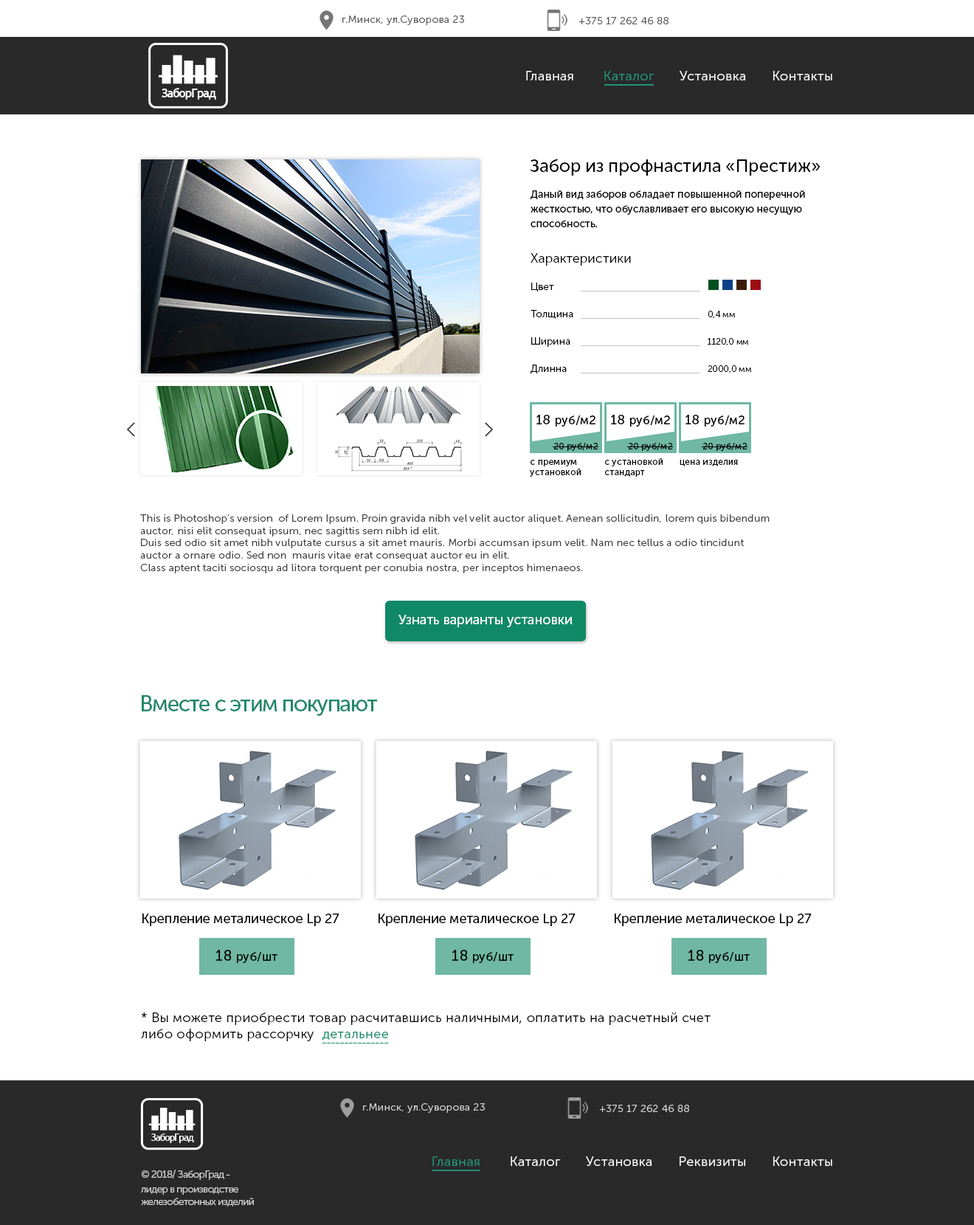
<style>
.page{position:relative;width:974px;height:1225px;background:#ffffff}
.page>*{position:absolute;margin:0}
.t1{font:10.3px "MuseoSansCyrl-300";letter-spacing:0.025em;color:#585858}
.t2{font:13.3px "MuseoSansCyrl-300";letter-spacing:0.025em;color:#ffffff}
.t3{font:13.3px "MuseoSansCyrl-300";letter-spacing:0.025em;color:#fefefe}
.t4{font:13.3px "MuseoSansCyrl-300";letter-spacing:0.025em;color:#209573}
.t5{font:12.2px "TrebuchetMS-Bold";letter-spacing:-0.075em;color:#ffffff}
.t6{font:17.7px "MuseoSansCyrl-500";color:#000000}
.t7{font:10.3px/14.8px "MuseoSansCyrl-500";color:#000000}
.t8{font:13.3px "MuseoSansCyrl-300";color:#000000}
.t9{font:10.3px "MuseoSansCyrl-300";color:#000000}
.t10{font:8.9px "MuseoSansCyrl-300";color:#000000}
.t11{font:11.8px "MuseoSansCyrl-500";letter-spacing:0.025em;color:#000000}
.t12{font:13.3px "MuseoSansCyrl-500";letter-spacing:0.025em;color:#000000}
.t13{font:8.9px "MuseoSansCyrl-500";letter-spacing:0.025em;color:#000000}
.t14{font:10.3px "MuseoSansCyrl-300";letter-spacing:0.025em;color:#404040}
.t15{font:13.3px "MuseoSansCyrl-500";color:#ffffff}
.t16{font:22.1px "MuseoSansCyrl-500";letter-spacing:-0.05em;color:#21886a}
.t17{font:13.3px "MuseoSansCyrl-500";color:#000000}
.t18{font:14.8px "MuseoSansCyrl-500";letter-spacing:0.025em;color:#000000}
.t19{font:13.3px "MuseoSansCyrl-300";letter-spacing:0.025em;color:#000000}
.t20{font:13.3px "MuseoSansCyrl-300";letter-spacing:0.025em;color:#108966}
.t21{font:10.3px "MuseoSansCyrl-300";letter-spacing:0.025em;color:#d4d4d4}
.t22{font:9.6px "TrebuchetMS-Bold";letter-spacing:-0.075em;color:#ffffff}
.t23{font:10.3px "MuseoSansCyrl-300";letter-spacing:-0.05em;color:#cfcfcf}
.t24{font:10.3px/14.8px "MuseoSansCyrl-300";letter-spacing:-0.05em;color:#cfcfcf}
</style>
<div class="page">
<p class="t1" style="left:342px;top:15px;width:122px;height:10px">г.Минск, ул.Суворова 23</p>
<p class="t1" style="left:578px;top:17px;width:90px;height:7px">+375 17 262 46 88</p>
<p class="t2" style="left:526px;top:71px;width:306px;height:9px"><span class="t3">Главная        </span><span class="t4">Каталог </span>      Установка       Контакты</p>
<p class="t5" style="left:162px;top:88px;width:54px;height:12px">ЗаборГрад</p>
<p class="t6" style="left:530px;top:159px;width:290px;height:17px">Забор из профнастила «Престиж»</p>
<p class="t7" style="left:530px;top:190px;width:275px;height:37px">Даный вид заборов обладает повышенной поперечной жесткостью, что обуславливает его высокую несущую способность.</p>
<p class="t8" style="left:530px;top:253px;width:101px;height:13px">Характеристики</p>
<p class="t9" style="left:531px;top:283px;width:23px;height:9px">Цвет</p>
<p class="t9" style="left:530px;top:310px;width:43px;height:9px">Толщина</p>
<p class="t10" style="left:707px;top:311px;width:28px;height:7px">0,4 мм</p>
<p class="t9" style="left:531px;top:337px;width:39px;height:10px">Ширина</p>
<p class="t10" style="left:707px;top:338px;width:41px;height:7px">1120,0 мм</p>
<p class="t9" style="left:530px;top:364px;width:37px;height:10px">Длинна</p>
<p class="t10" style="left:707px;top:365px;width:44px;height:8px">2000,0 мм</p>
<p class="t11" style="left:536px;top:415px;width:59px;height:11px"><span class="t12">18 </span>руб/м2</p>
<p class="t11" style="left:611px;top:415px;width:59px;height:11px"><span class="t12">18 </span>руб/м2</p>
<p class="t11" style="left:685px;top:415px;width:59px;height:11px"><span class="t12">18 </span>руб/м2</p>
<p class="t13" style="left:554px;top:443px;width:44px;height:8px">20 руб/м2</p>
<p class="t13" style="left:629px;top:443px;width:44px;height:8px">20 руб/м2</p>
<p class="t13" style="left:703px;top:443px;width:44px;height:8px">20 руб/м2</p>
<p class="t13" style="left:530px;top:460px;width:51px;height:17px">с премиум <br>установкой</p>
<p class="t13" style="left:605px;top:458px;width:57px;height:19px">с установкой<br>стандарт</p>
<p class="t13" style="left:679px;top:460px;width:59px;height:6px">цена изделия</p>
<p class="t14" style="left:140px;top:514px;width:629px;height:59px">This is Photoshop's version  of Lorem Ipsum. Proin gravida nibh vel velit auctor aliquet. Aenean sollicitudin, lorem quis bibendum auctor, nisi elit consequat ipsum, nec sagittis sem nibh id elit.<br>Duis sed odio sit amet nibh vulputate cursus a sit amet mauris. Morbi accumsan ipsum velit. Nam nec tellus a odio tincidunt auctor a ornare odio. Sed non  mauris vitae erat consequat auctor eu in elit.<br>Class aptent taciti sociosqu ad litora torquent per conubia nostra, per inceptos himenaeos.</p>
<p class="t15" style="left:398px;top:614px;width:174px;height:13px">Узнать варианты установки</p>
<p class="t16" style="left:142px;top:695px;width:236px;height:21px">Вместе с этим покупают</p>
<p class="t17" style="left:142px;top:913px;width:197px;height:13px">Крепление металическое Lp 27</p>
<p class="t17" style="left:378px;top:913px;width:197px;height:13px">Крепление металическое Lp 27</p>
<p class="t17" style="left:614px;top:913px;width:197px;height:13px">Крепление металическое Lp 27</p>
<p class="t11" style="left:215px;top:949px;width:62px;height:14px"><span class="t18">18 </span>руб/шт</p>
<p class="t11" style="left:451px;top:949px;width:62px;height:14px"><span class="t18">18 </span>руб/шт</p>
<p class="t11" style="left:688px;top:949px;width:61px;height:14px"><span class="t18">18 </span>руб/шт</p>
<p class="t19" style="left:141px;top:1012px;width:569px;height:29px">* Вы можете приобрести товар расчитавшись наличными, оплатить на расчетный счет<br>либо оформить рассорчку  <span class="t20">детальнее</span></p>
<p class="t21" style="left:363px;top:1103px;width:122px;height:9px">г.Минск, ул.Суворова 23</p>
<p class="t21" style="left:599px;top:1104px;width:90px;height:8px">+375 17 262 46 88</p>
<p class="t22" style="left:150px;top:1133px;width:44px;height:10px">ЗаборГрад</p>
<p class="t2" style="left:432px;top:1156px;width:400px;height:10px"><span class="t4">Главная </span>       Каталог       Установка       Реквизиты       Контакты</p>
<p class="t23" style="left:141px;top:1169px;width:113px;height:37px">© 2018/ ЗаборГрад - <br><span class="t24">лидер в производстве <br></span>железобетонных изделий</p>
</div>
